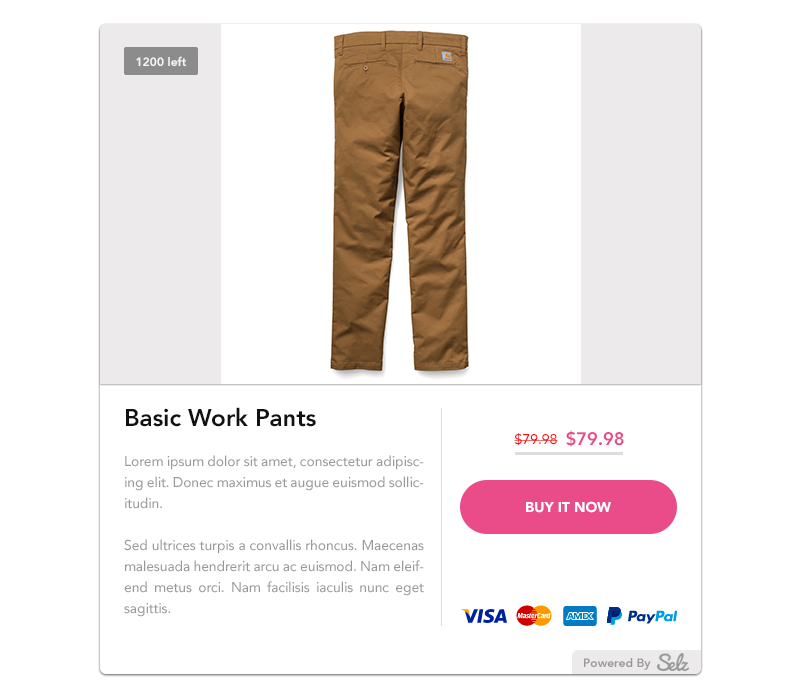
<style>
.page{position:relative;width:800px;height:700px;background:#ffffff}
.page>*{position:absolute;margin:0}
.t1{font:12px "Avenir-Heavy";color:#ffffff}
.t2{font:24px "Avenir-Heavy";color:#111111}
.t3{font:14px "Avenir-Medium";color:#f71010}
.t4{font:18px "Avenir-Heavy";color:#ea4c89}
.t5{font:14px/21px "Avenir-Roman";color:#999999}
.t6{font:14px "Avenir-Black";color:#ffffff;text-transform:uppercase}
.t7{font:12px "Avenir-Heavy";color:#999999}
</style>
<div class="page">
<p class="t1" style="left:136px;top:56px;width:50px;height:10px">1200 left</p>
<p class="t2" style="left:126px;top:407px;width:190px;height:20px">Basic Work Pants</p>
<p class="t3" style="left:514px;top:433px;width:44px;height:13px">$79.98</p>
<p class="t4" style="left:566px;top:430px;width:58px;height:17px">$79.98</p>
<p class="t5" style="left:124px;top:455px;width:300px;height:162px;text-align:justify">Lorem ipsum dolor sit amet, consectetur adipiscing elit. Donec maximus et augue euismod sollicitudin. <br><br>Sed ultrices turpis a convallis rhoncus. Maecenas malesuada hendrerit arcu ac euismod. Nam eleifend metus orci. Nam facilisis iaculis nunc eget sagittis.</p>
<p class="t6" style="left:526px;top:501px;width:85px;height:12px">Buy it now</p>
<p class="t7" style="left:584px;top:658px;width:67px;height:12px">Powered By</p>
</div>
